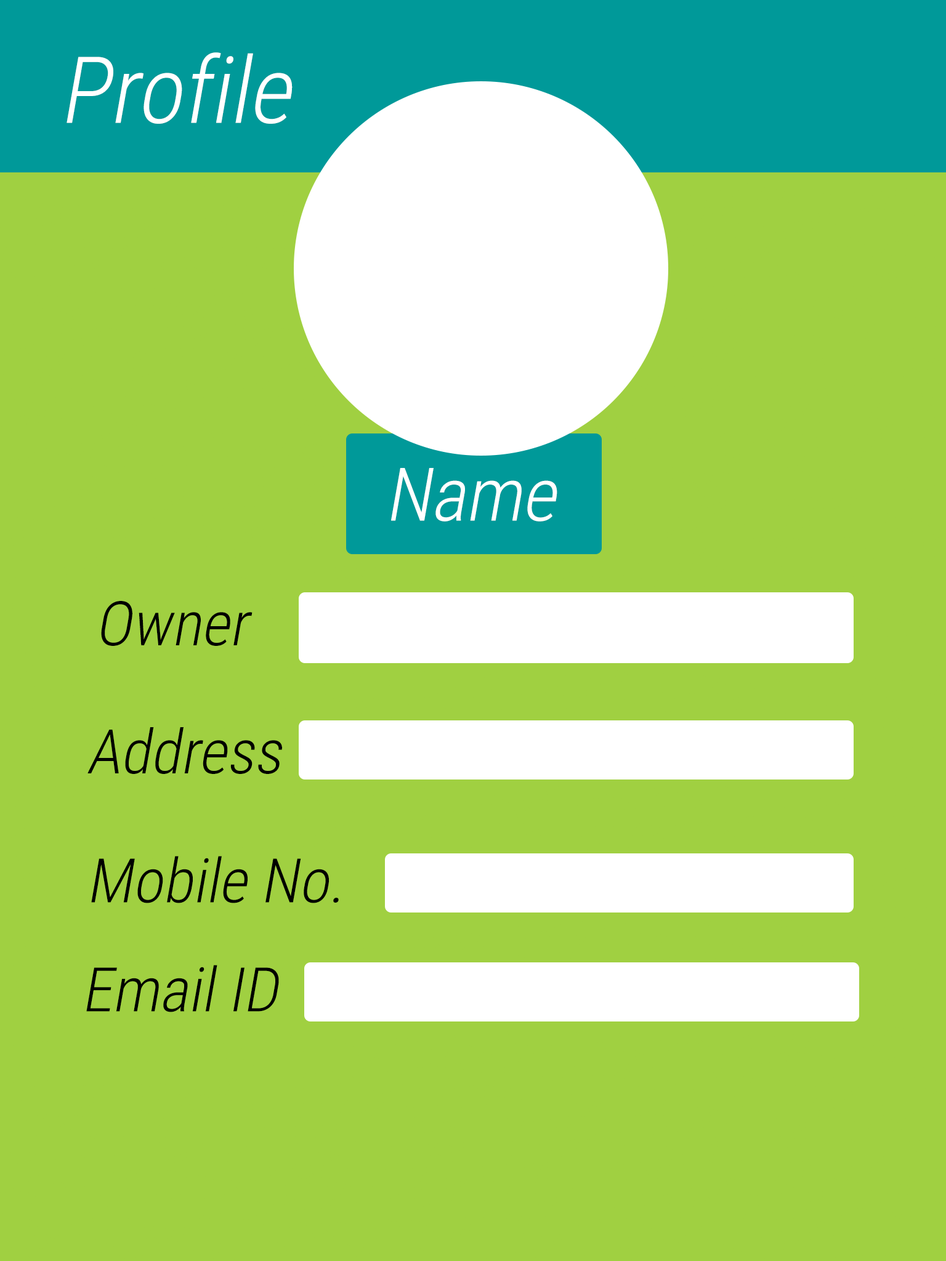
<style>
.page{position:relative;width:946px;height:1261px;background:#a0d041}
.page>*{position:absolute;margin:0}
.t1{font:92.4px "RobotoCondensed-Light";color:#ffffff;font-style:italic}
.t2{font:73.9px "RobotoCondensed-Light";color:#ffffff;font-style:italic}
.t3{font:61.6px "RobotoCondensed-Light";color:#000000;font-style:italic}
</style>
<div class="page">
<p class="t1" style="left:66px;top:52px;width:226px;height:72px">Profile</p>
<p class="t2" style="left:391px;top:468px;width:166px;height:53px">Name</p>
<p class="t3" style="left:101px;top:601px;width:151px;height:45px">Owner</p>
<p class="t3" style="left:87px;top:727px;width:195px;height:47px">Address</p>
<p class="t3" style="left:91px;top:856px;width:248px;height:47px">Mobile No.</p>
<p class="t3" style="left:86px;top:965px;width:193px;height:47px">Email ID</p>
</div>
